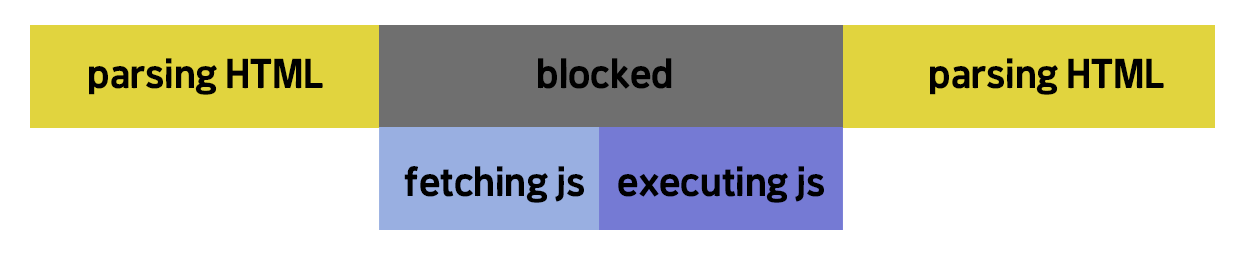
<style>
.page{position:relative;width:1242px;height:254px;background:#ffffff}
.page>*{position:absolute;margin:0}
.t1{font:36px "SDNemony-aBasic";color:#000000}
</style>
<div class="page">
<p class="t1" style="left:89px;top:58px;width:234px;height:37px">parsing HTML</p>
<p class="t1" style="left:538px;top:58px;width:134px;height:31px">blocked</p>
<p class="t1" style="left:930px;top:58px;width:234px;height:37px">parsing HTML</p>
<p class="t1" style="left:404px;top:166px;width:180px;height:37px">fetching js</p>
<p class="t1" style="left:618px;top:166px;width:206px;height:37px">executing js</p>
</div>
